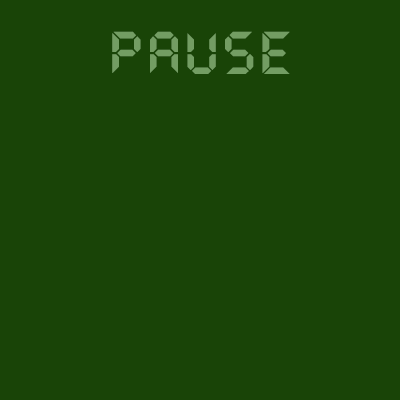
<style>
.page{position:relative;width:400px;height:400px;background:#194407}
.page>*{position:absolute;margin:0}
.t1{font:60px "QuartzMS";color:#739d63}
</style>
<div class="page">
<p class="t1" style="left:112px;top:31px;width:178px;height:43px">PAUSe</p>
</div>
